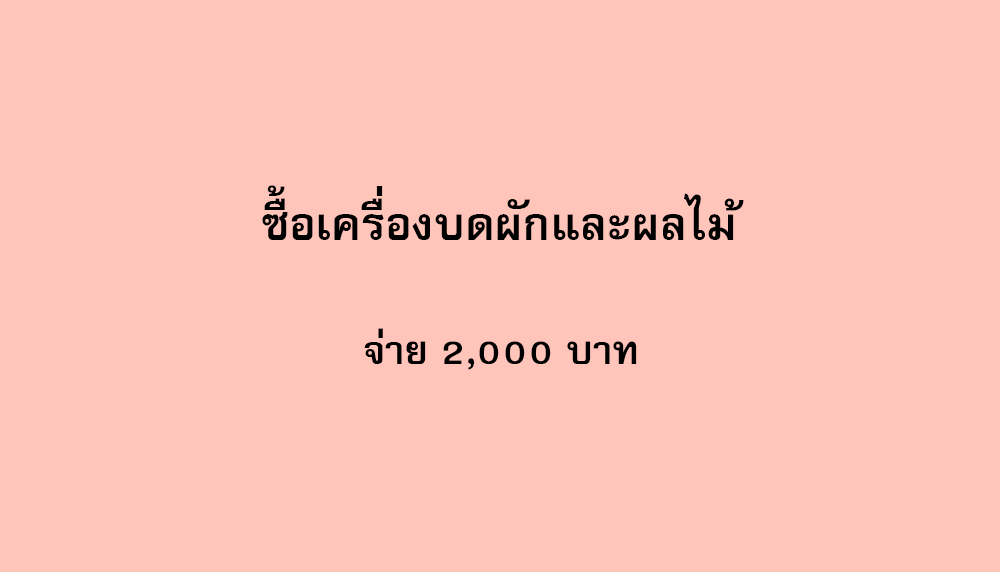
<style>
.page{position:relative;width:1000px;height:572px;background:#ffc4ba}
.page>*{position:absolute;margin:0}
.t1{font:64px "FreesiaUPCBold";color:#000000}
.t2{font:56px "FreesiaUPCBold";color:#000000}
</style>
<div class="page">
<p class="t1" style="left:262px;top:185px;width:482px;height:55px">ซื้อเครื่องบดผักและผลไม้</p>
<p class="t2" style="left:364px;top:328px;width:273px;height:42px">จ่าย 2,000 บาท</p>
</div>
